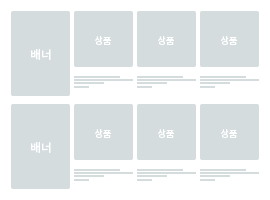
<style>
.page{position:relative;width:270px;height:200px;background:#d4dcde}
.page>*{position:absolute;margin:0}
.t1{font:9.1px "NotoSansCJKkr-Medium";color:#ffffff}
.t2{font:12px "NotoSansCJKkr-Medium";color:#ffffff}
</style>
<div class="page">
<p class="t1" style="left:95px;top:36px;width:16px;height:9px">상품</p>
<p class="t1" style="left:158px;top:36px;width:16px;height:9px">상품</p>
<p class="t1" style="left:221px;top:36px;width:16px;height:9px">상품</p>
<p class="t2" style="left:31px;top:48px;width:20px;height:12px">배너</p>
<p class="t1" style="left:95px;top:129px;width:16px;height:9px">상품</p>
<p class="t1" style="left:158px;top:129px;width:16px;height:9px">상품</p>
<p class="t1" style="left:221px;top:129px;width:16px;height:9px">상품</p>
<p class="t2" style="left:31px;top:141px;width:20px;height:12px">배너</p>
</div>
